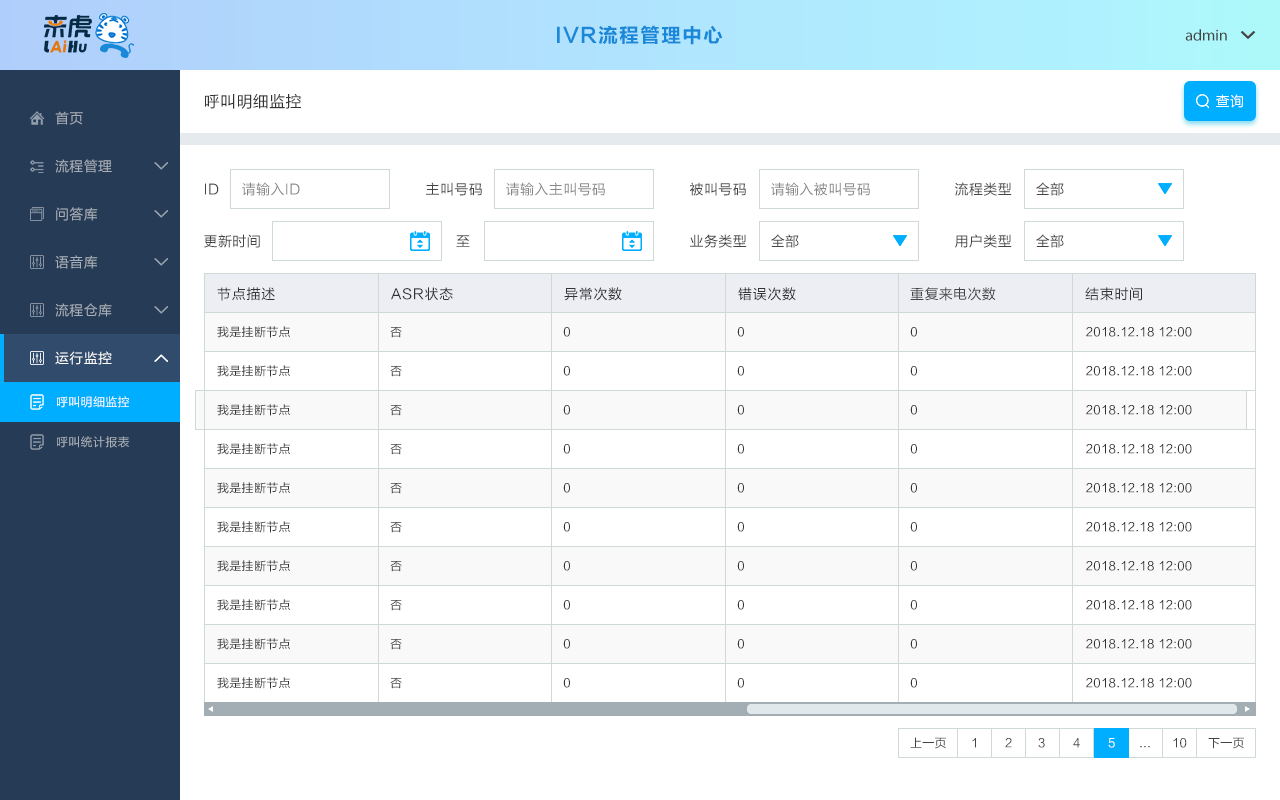
<style>
.page{position:relative;width:1280px;height:800px;background:#ffffff}
.page>*{position:absolute;margin:0}
.t1{font:20px "FZLTCHJW--GB1-0";letter-spacing:0.05em;color:#1a88d9}
.t2{font:16px "MyriadPro-Regular";color:#444444}
.t3{font:16px "FZLTHJW--GB1-0";letter-spacing:0.025em;color:#333333}
.t4{font:14px "FZLTHJW--GB1-0";letter-spacing:0.05em;color:#ffffff}
.t5{font:14px "FZLTHJW--GB1-0";letter-spacing:0.025em;color:#a9afb7}
.t6{font:14px "FZLTHJW--GB1-0";letter-spacing:0.025em;color:#aaafb7}
.t7{font:14px "FZLTHJW--GB1-0";letter-spacing:0.025em;color:#444444}
.t8{font:14px "FZLTHJW--GB1-0";letter-spacing:0.025em;color:#888888}
.t9{font:14px "FZLTHJW--GB1-0";letter-spacing:0.01em;color:#444444}
.t10{font:14px "FZLTHJW--GB1-0";letter-spacing:0.05em;color:#333333}
.t11{font:12px "FZLTHJW--GB1-0";letter-spacing:0.025em;color:#333333}
.t12{font:12px "FZLTHJW--GB1-0";letter-spacing:0.025em}
.t13{font:14px "FZLTHJW--GB1-0";letter-spacing:0.025em;color:#ffffff}
.t14{font:12px "FZLTHJW--GB1-0";letter-spacing:0.025em;color:#ffffff}
.t15{font:12px "FZLTHJW--GB1-0";letter-spacing:0.025em;color:#aaafb7}
.t16{font:12px "FZLTHJW--GB1-0";letter-spacing:0.025em;color:#444444}
</style>
<div class="page">
<p class="t1" style="left:557px;top:25px;width:166px;height:20px">IVR流程管理中心</p>
<p class="t2" style="left:1185px;top:29px;width:42px;height:12px">admin</p>
<p class="t3" style="left:205px;top:93px;width:96px;height:16px">呼叫明细监控</p>
<p class="t4" style="left:1216px;top:94px;width:27px;height:14px">查询</p>
<p class="t5" style="left:55px;top:111px;width:28px;height:14px">首页</p>
<p class="t6" style="left:55px;top:159px;width:57px;height:14px">流程管理</p>
<p class="t7" style="left:205px;top:183px;width:14px;height:12px">ID</p>
<p class="t8" style="left:242px;top:182px;width:58px;height:14px">请输入ID</p>
<p class="t7" style="left:426px;top:182px;width:56px;height:14px">主叫号码</p>
<p class="t8" style="left:506px;top:182px;width:99px;height:14px">请输入主叫号码</p>
<p class="t7" style="left:690px;top:182px;width:56px;height:14px">被叫号码</p>
<p class="t8" style="left:771px;top:182px;width:99px;height:14px">请输入被叫号码</p>
<p class="t7" style="left:955px;top:182px;width:57px;height:14px">流程类型</p>
<p class="t7" style="left:1036px;top:182px;width:28px;height:14px">全部</p>
<p class="t6" style="left:56px;top:207px;width:42px;height:14px">问答库</p>
<p class="t7" style="left:204px;top:234px;width:56px;height:14px">更新时间</p>
<p class="t9" style="left:456px;top:235px;width:14px;height:12px">至</p>
<p class="t7" style="left:690px;top:234px;width:57px;height:14px">业务类型</p>
<p class="t7" style="left:771px;top:234px;width:28px;height:14px">全部</p>
<p class="t7" style="left:955px;top:234px;width:57px;height:14px">用户类型</p>
<p class="t7" style="left:1036px;top:234px;width:28px;height:14px">全部</p>
<p class="t6" style="left:55px;top:255px;width:43px;height:14px">语音库</p>
<p class="t10" style="left:217px;top:287px;width:58px;height:14px">节点描述</p>
<p class="t10" style="left:391px;top:287px;width:62px;height:14px">ASR状态</p>
<p class="t10" style="left:564px;top:287px;width:58px;height:14px">异常次数</p>
<p class="t10" style="left:738px;top:287px;width:58px;height:14px">错误次数</p>
<p class="t7" style="left:910px;top:287px;width:86px;height:14px">重复来电次数</p>
<p class="t10" style="left:1085px;top:287px;width:57px;height:14px">结束时间</p>
<p class="t6" style="left:55px;top:303px;width:57px;height:14px">流程仓库</p>
<p class="t11" style="left:217px;top:326px;width:73px;height:12px">我是挂断节点</p>
<p class="t12" style="left:390px;top:327px;width:12px;height:11px">否</p>
<p class="t11" style="left:563px;top:327px;width:7px;height:10px">0</p>
<p class="t11" style="left:737px;top:327px;width:7px;height:10px">0</p>
<p class="t11" style="left:910px;top:327px;width:7px;height:10px">0</p>
<p class="t11" style="left:1086px;top:327px;width:106px;height:10px">2018.12.18 12:00</p>
<p class="t13" style="left:55px;top:351px;width:57px;height:14px">运行监控</p>
<p class="t11" style="left:217px;top:365px;width:73px;height:12px">我是挂断节点</p>
<p class="t12" style="left:390px;top:366px;width:12px;height:11px">否</p>
<p class="t11" style="left:563px;top:366px;width:7px;height:10px">0</p>
<p class="t11" style="left:737px;top:366px;width:7px;height:10px">0</p>
<p class="t11" style="left:910px;top:366px;width:7px;height:10px">0</p>
<p class="t11" style="left:1086px;top:366px;width:106px;height:10px">2018.12.18 12:00</p>
<p class="t14" style="left:57px;top:396px;width:72px;height:12px">呼叫明细监控</p>
<p class="t11" style="left:217px;top:404px;width:73px;height:12px">我是挂断节点</p>
<p class="t12" style="left:390px;top:405px;width:12px;height:11px">否</p>
<p class="t11" style="left:563px;top:405px;width:7px;height:10px">0</p>
<p class="t11" style="left:737px;top:405px;width:7px;height:10px">0</p>
<p class="t11" style="left:910px;top:405px;width:7px;height:10px">0</p>
<p class="t11" style="left:1086px;top:405px;width:106px;height:10px">2018.12.18 12:00</p>
<p class="t15" style="left:57px;top:436px;width:73px;height:12px">呼叫统计报表</p>
<p class="t11" style="left:217px;top:443px;width:73px;height:12px">我是挂断节点</p>
<p class="t12" style="left:390px;top:444px;width:12px;height:11px">否</p>
<p class="t11" style="left:563px;top:444px;width:7px;height:10px">0</p>
<p class="t11" style="left:737px;top:444px;width:7px;height:10px">0</p>
<p class="t11" style="left:910px;top:444px;width:7px;height:10px">0</p>
<p class="t11" style="left:1086px;top:444px;width:106px;height:10px">2018.12.18 12:00</p>
<p class="t11" style="left:217px;top:482px;width:73px;height:12px">我是挂断节点</p>
<p class="t12" style="left:390px;top:483px;width:12px;height:11px">否</p>
<p class="t11" style="left:563px;top:483px;width:7px;height:10px">0</p>
<p class="t11" style="left:737px;top:483px;width:7px;height:10px">0</p>
<p class="t11" style="left:910px;top:483px;width:7px;height:10px">0</p>
<p class="t11" style="left:1086px;top:483px;width:106px;height:10px">2018.12.18 12:00</p>
<p class="t11" style="left:217px;top:521px;width:73px;height:12px">我是挂断节点</p>
<p class="t12" style="left:390px;top:522px;width:12px;height:11px">否</p>
<p class="t11" style="left:563px;top:522px;width:7px;height:10px">0</p>
<p class="t11" style="left:737px;top:522px;width:7px;height:10px">0</p>
<p class="t11" style="left:910px;top:522px;width:7px;height:10px">0</p>
<p class="t11" style="left:1086px;top:522px;width:106px;height:10px">2018.12.18 12:00</p>
<p class="t11" style="left:217px;top:560px;width:73px;height:12px">我是挂断节点</p>
<p class="t12" style="left:390px;top:561px;width:12px;height:11px">否</p>
<p class="t11" style="left:563px;top:561px;width:7px;height:10px">0</p>
<p class="t11" style="left:737px;top:561px;width:7px;height:10px">0</p>
<p class="t11" style="left:910px;top:561px;width:7px;height:10px">0</p>
<p class="t11" style="left:1086px;top:561px;width:106px;height:10px">2018.12.18 12:00</p>
<p class="t11" style="left:217px;top:599px;width:73px;height:12px">我是挂断节点</p>
<p class="t12" style="left:390px;top:600px;width:12px;height:11px">否</p>
<p class="t11" style="left:563px;top:600px;width:7px;height:10px">0</p>
<p class="t11" style="left:737px;top:600px;width:7px;height:10px">0</p>
<p class="t11" style="left:910px;top:600px;width:7px;height:10px">0</p>
<p class="t11" style="left:1086px;top:600px;width:106px;height:10px">2018.12.18 12:00</p>
<p class="t11" style="left:217px;top:638px;width:73px;height:12px">我是挂断节点</p>
<p class="t12" style="left:390px;top:639px;width:12px;height:11px">否</p>
<p class="t11" style="left:563px;top:639px;width:7px;height:10px">0</p>
<p class="t11" style="left:737px;top:639px;width:7px;height:10px">0</p>
<p class="t11" style="left:910px;top:639px;width:7px;height:10px">0</p>
<p class="t11" style="left:1086px;top:639px;width:106px;height:10px">2018.12.18 12:00</p>
<p class="t11" style="left:217px;top:677px;width:73px;height:12px">我是挂断节点</p>
<p class="t12" style="left:390px;top:678px;width:12px;height:11px">否</p>
<p class="t11" style="left:563px;top:678px;width:7px;height:10px">0</p>
<p class="t11" style="left:737px;top:678px;width:7px;height:10px">0</p>
<p class="t11" style="left:910px;top:678px;width:7px;height:10px">0</p>
<p class="t11" style="left:1086px;top:678px;width:106px;height:10px">2018.12.18 12:00</p>
<p class="t16" style="left:910px;top:737px;width:36px;height:12px">上一页</p>
<p class="t16" style="left:1208px;top:737px;width:36px;height:12px">下一页</p>
<p class="t16" style="left:972px;top:738px;width:4px;height:10px">1</p>
<p class="t16" style="left:1005px;top:738px;width:7px;height:10px">2</p>
<p class="t16" style="left:1038px;top:738px;width:7px;height:10px">3</p>
<p class="t12" style="left:1073px;top:738px;width:7px;height:10px">4</p>
<p class="t14" style="left:1108px;top:738px;width:7px;height:10px">5</p>
<p class="t12" style="left:1140px;top:746px;width:10px;height:2px">...</p>
<p class="t16" style="left:1173px;top:738px;width:14px;height:10px">10</p>
</div>
